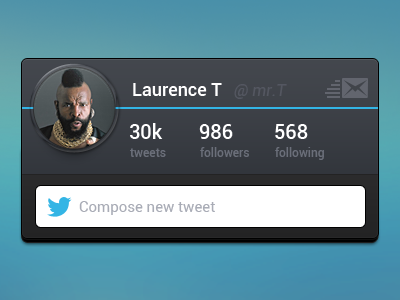
<style>
.page{position:relative;width:400px;height:300px}
.page>*{position:absolute;margin:0}
.t1{font:18px "Roboto-Medium";color:#ffffff}
.t2{font:16px "Roboto-Italic";color:#545761}
.t3{font:20px "Roboto-Medium";color:#ffffff}
.t4{font:12px "Roboto-Medium";color:#6b6f7a}
.t5{font:15px "Roboto-Regular";color:#a9acb6}
</style>
<div class="page">
<p class="t1" style="left:133px;top:83px;width:89px;height:13px">Laurence T</p>
<p class="t2" style="left:234px;top:84px;width:53px;height:15px">@ mr.T</p>
<p class="t3" style="left:130px;top:123px;width:33px;height:16px">30k</p>
<p class="t3" style="left:199px;top:124px;width:34px;height:15px">986</p>
<p class="t3" style="left:275px;top:124px;width:33px;height:15px">568</p>
<p class="t4" style="left:130px;top:148px;width:36px;height:9px">tweets</p>
<p class="t4" style="left:200px;top:147px;width:49px;height:10px">followers</p>
<p class="t4" style="left:275px;top:147px;width:49px;height:13px">following</p>
<p class="t5" style="left:79px;top:201px;width:136px;height:14px">Compose new tweet</p>
</div>
